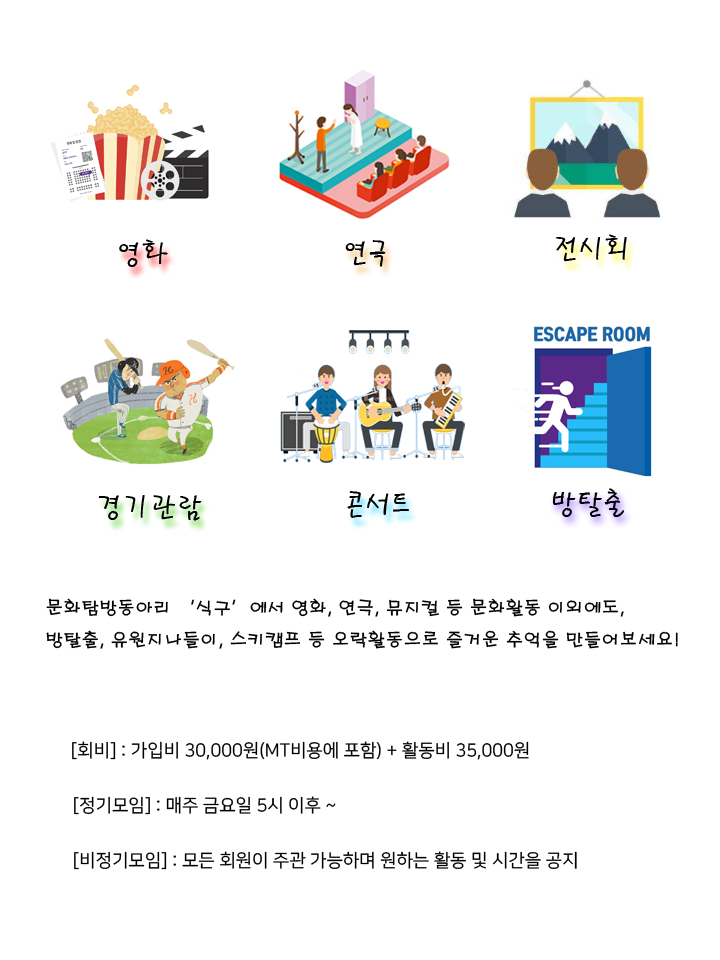
<style>
.page{position:relative;width:720px;height:960px;background:#ffffff}
.page>*{position:absolute;margin:0}
.t1{font:30px "PyunjiR-HM";color:#000000}
.t2{font:18px "H2porM";color:#000000}
.t3{font:18px "NanumSquareR";color:#000000}
</style>
<div class="page">
<p class="t1" style="left:119px;top:239px;width:49px;height:28px">영화</p>
<p class="t1" style="left:345px;top:240px;width:41px;height:27px">연극</p>
<p class="t1" style="left:556px;top:234px;width:71px;height:28px">전시회</p>
<p class="t1" style="left:98px;top:495px;width:104px;height:26px">경기관람</p>
<p class="t1" style="left:347px;top:491px;width:62px;height:27px">콘서트</p>
<p class="t1" style="left:552px;top:488px;width:73px;height:29px">방탈출</p>
<p class="t2" style="left:46px;top:598px;width:632px;height:51px">문화탐방동아리 ‘식구’에서 영화, 연극, 뮤지컬 등 문화활동 이외에도, <br>방탈출, 유원지나들이, 스키캠프 등 오락활동으로 즐거운 추억을 만들어보세요!</p>
<p class="t3" style="left:72px;top:741px;width:457px;height:19px">[회비] : 가입비 30,000원(MT비용에 포함) + 활동비 35,000원</p>
<p class="t3" style="left:74px;top:796px;width:262px;height:19px">[정기모임] : 매주 금요일 5시 이후 ~</p>
<p class="t3" style="left:74px;top:851px;width:503px;height:19px">[비정기모임] : 모든 회원이 주관 가능하며 원하는 활동 및 시간을 공지</p>
</div>
